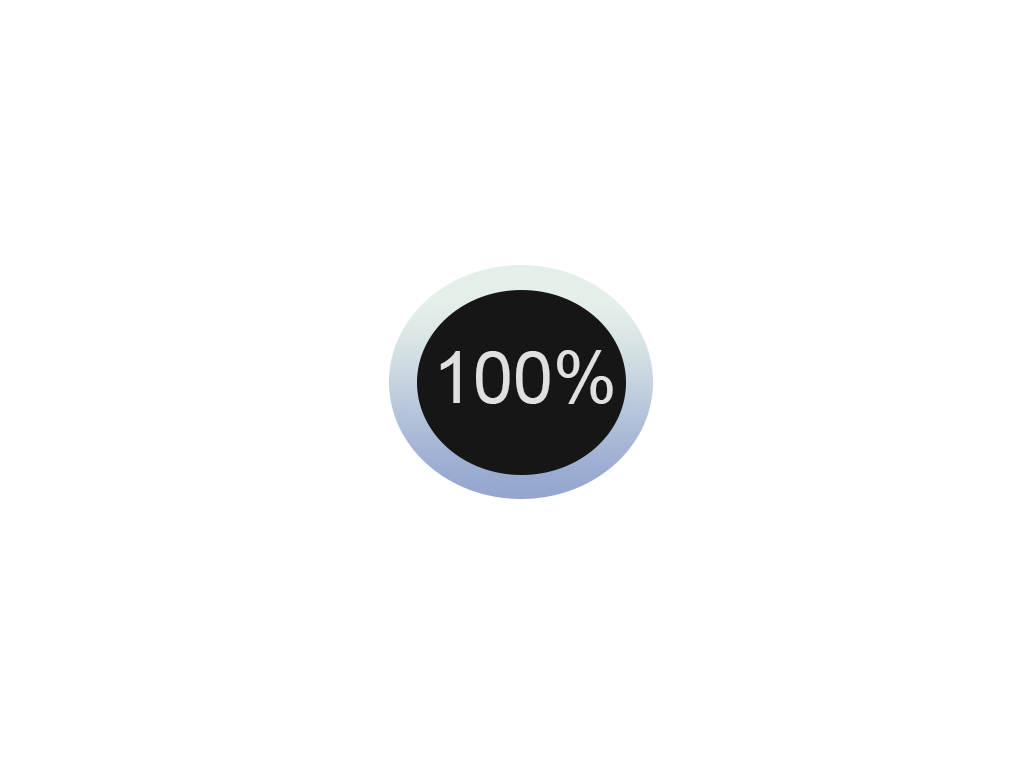
<style>
.page{position:relative;width:1024px;height:768px;background:#ffffff}
.page>*{position:absolute;margin:0}
.t1{font:72px "ArialMT";color:#e0e0e0}
</style>
<div class="page">
<p class="t1" style="left:440px;top:350px;width:173px;height:54px">100%</p>
</div>
